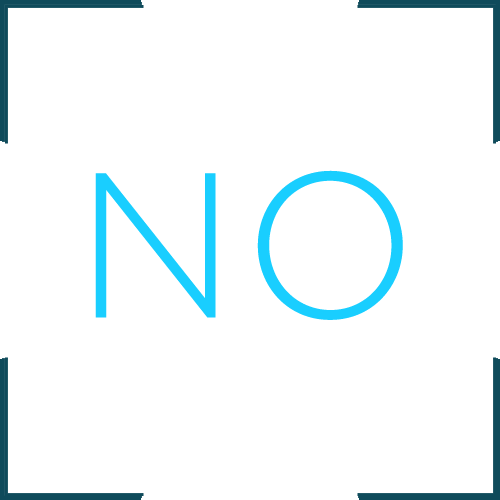
<style>
.page{position:relative;width:500px;height:500px;background:#ffffff}
.page>*{position:absolute;margin:0}
.t1{font:205.5px "Gotham-Light";letter-spacing:0.03em;color:#19ceff}
</style>
<div class="page">
<p class="t1" style="left:95px;top:170px;width:308px;height:150px">NO</p>
</div>
